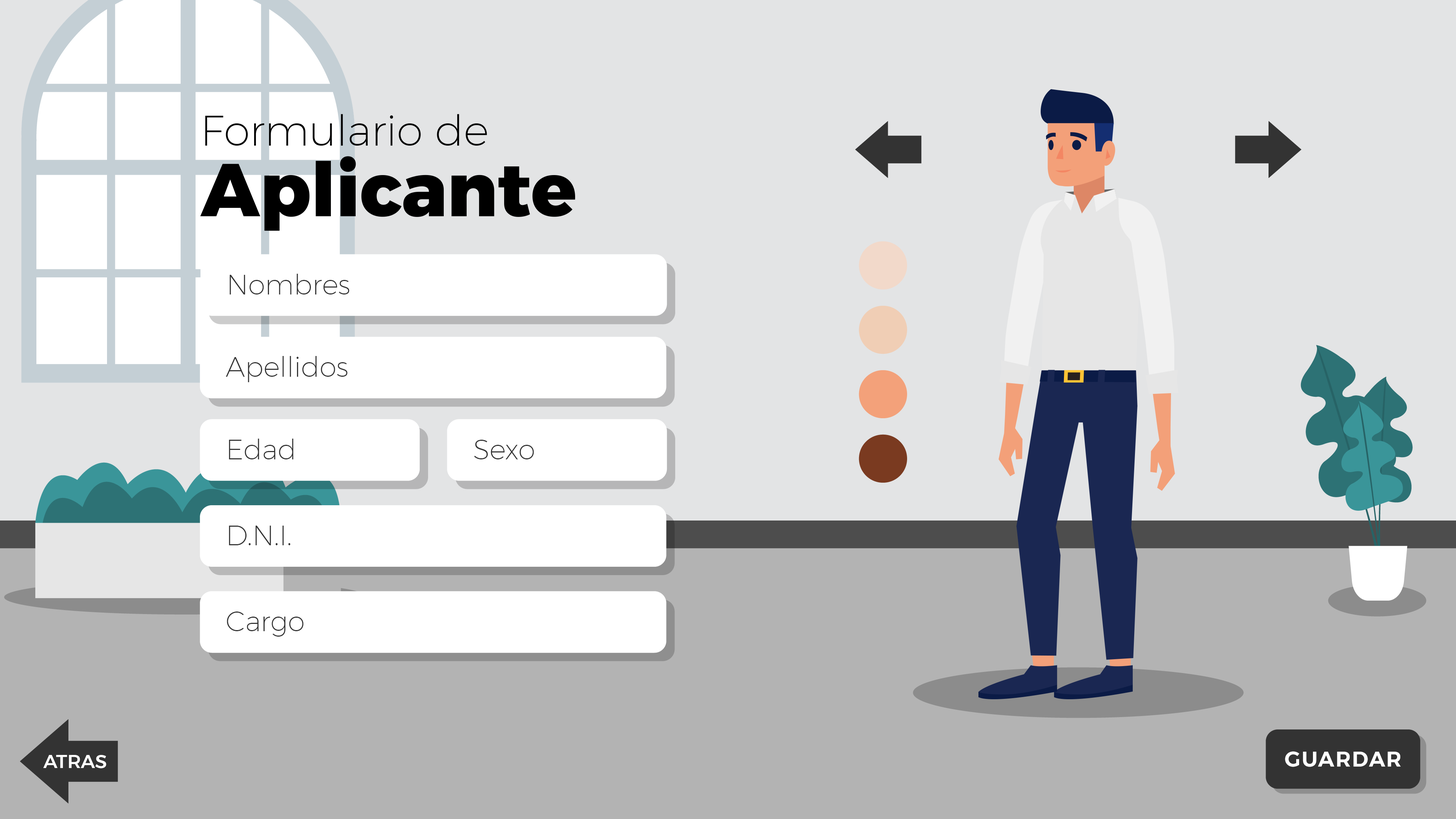
<style>
.page{position:relative;width:1456px;height:819px;background:#e3e4e5}
.page>*{position:absolute;margin:0}
.t1{font:27.5px "Montserrat-ExtraLight";color:#333333}
</style>
<div class="page">
<p class="t1" style="left:230px;top:274px;width:119px;height:20px">Nombres</p>
<p class="t1" style="left:226px;top:356px;width:122px;height:26px">Apellidos</p>
<p class="t1" style="left:229px;top:439px;width:64px;height:20px">Edad</p>
<p class="t1" style="left:474px;top:440px;width:60px;height:19px">Sexo</p>
<p class="t1" style="left:229px;top:526px;width:61px;height:19px">D.N.I.</p>
<p class="t1" style="left:227px;top:612px;width:77px;height:25px">Cargo</p>
</div>
